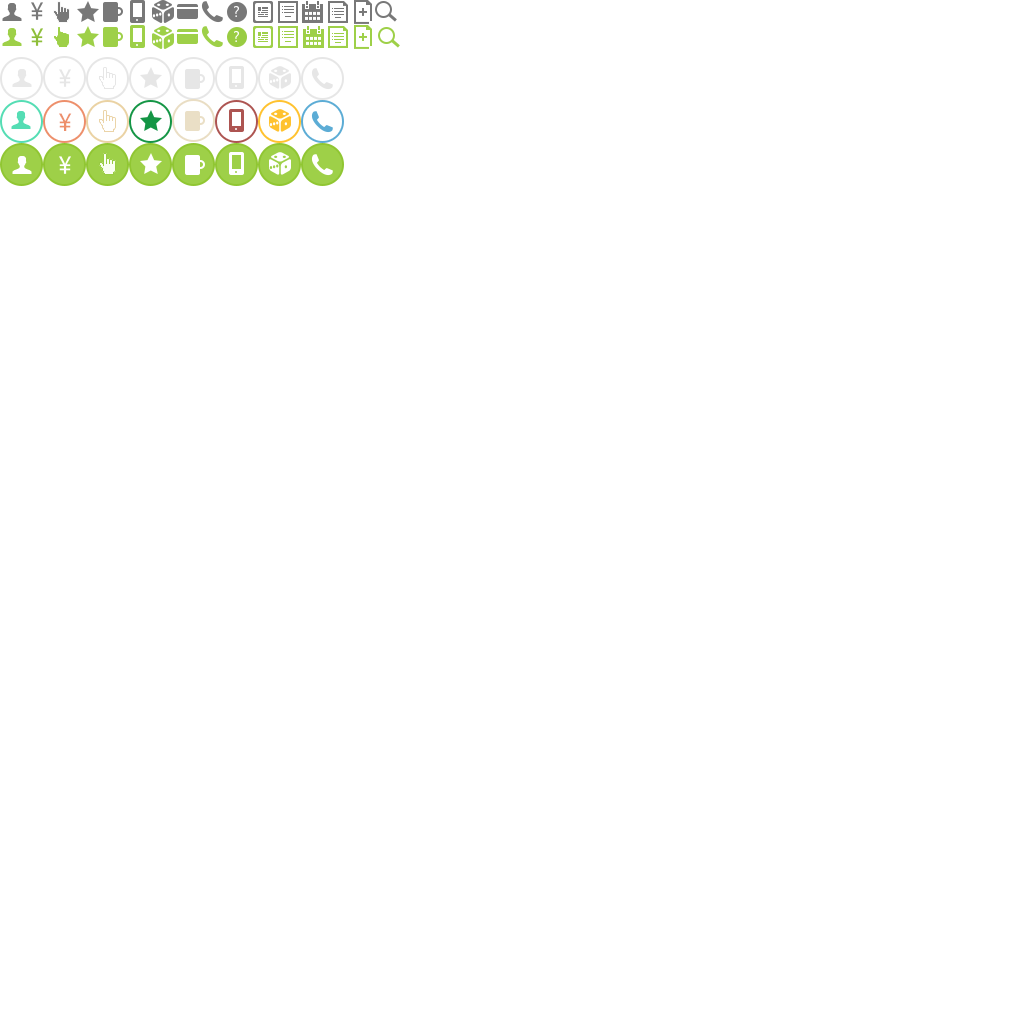
<style>
.page{position:relative;width:1024px;height:1024px;background:#ffffff}
.page>*{position:absolute;margin:0}
.t1{font:23px "MicrosoftYaHei";color:#ed8f6b}
</style>
<div class="page">
<p class="t1" style="left:59px;top:113px;width:13px;height:18px">¥</p>
</div>
